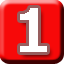
<style>
.page{position:relative;width:64px;height:64px;background:#f70909}
.page>*{position:absolute;margin:0}
.t1{font:60px "Meiryo-Bold";color:#ffffff}
</style>
<div class="page">
<p class="t1" style="left:20px;top:8px;width:27px;height:44px">1</p>
</div>
